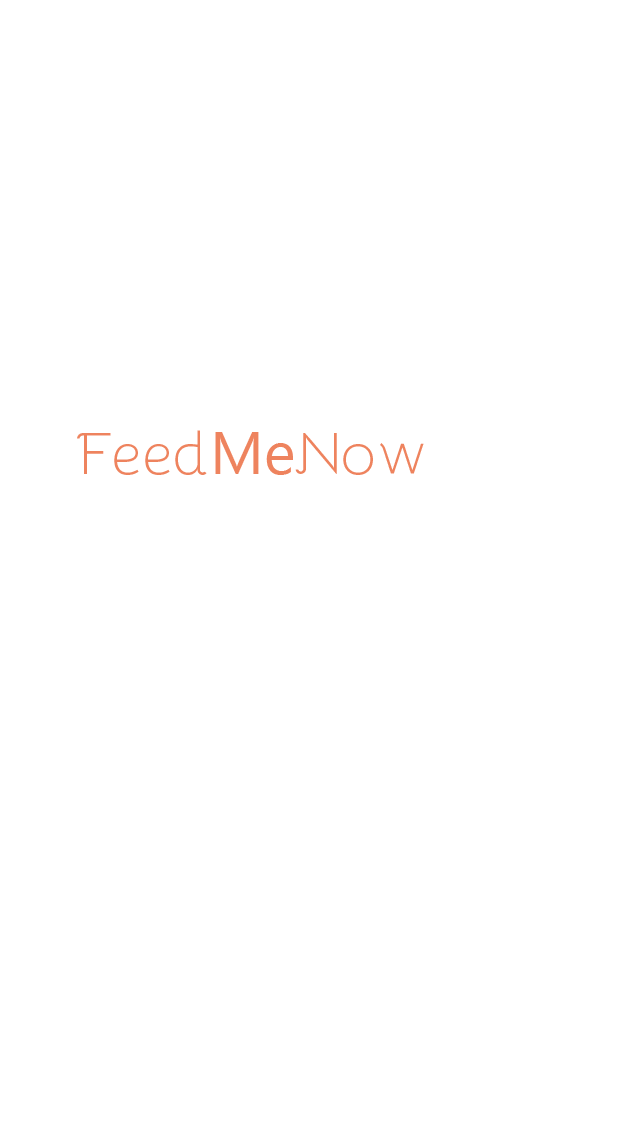
<style>
.page{position:relative;width:640px;height:1136px;background:#ffffff}
.page>*{position:absolute;margin:0}
.t1{font:60px "Bellota-Light";color:#ee835e}
.t2{font:60px "NirmalaUI";color:#ee835e}
</style>
<div class="page">
<p class="t1" style="left:77px;top:430px;width:347px;height:45px">Feed<span class="t2">Me</span>Now</p>
</div>
